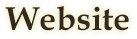
<style>
.page{position:relative;width:137px;height:39px}
.page>*{position:absolute;margin:0}
.t1{font:33.3px "BookAntiqua-Bold";color:#332a1c}
</style>
<div class="page">
<p class="t1" style="left:5px;top:6px;width:124px;height:25px">Website</p>
</div>
